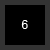
<style>
.page{position:relative;width:50px;height:50px;background:#000000}
.page>*{position:absolute;margin:0}
.t1{font:12px "ArialMT";color:#ffffff}
</style>
<div class="page">
<p class="t1" style="left:21px;top:20px;width:7px;height:9px">6</p>
</div>
